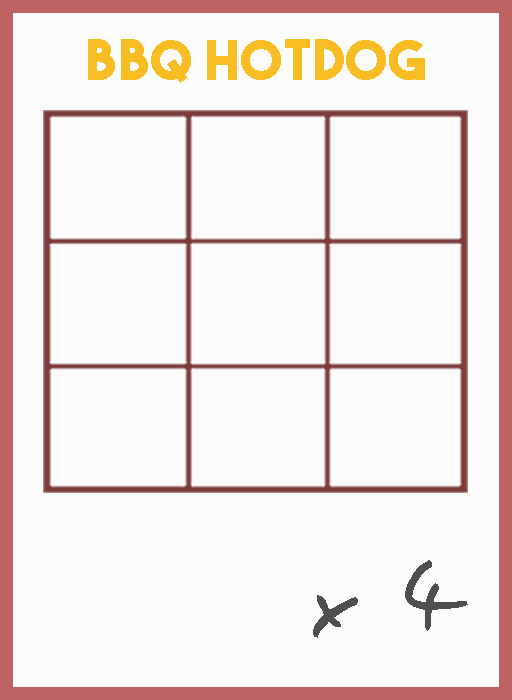
<style>
.page{position:relative;width:512px;height:700px;background:#fbfbfb}
.page>*{position:absolute;margin:0}
.t1{font:54.5px "TheBoldFont";letter-spacing:0.05em;color:#f7bd22}
.t2{font:106.1px "EasySpeech";letter-spacing:0.05em;color:#4f4f4f}
</style>
<div class="page">
<p class="t1" style="left:88px;top:39px;width:337px;height:44px">bbq Hotdog</p>
<p class="t2" style="left:313px;top:560px;width:155px;height:78px">x 4</p>
</div>
